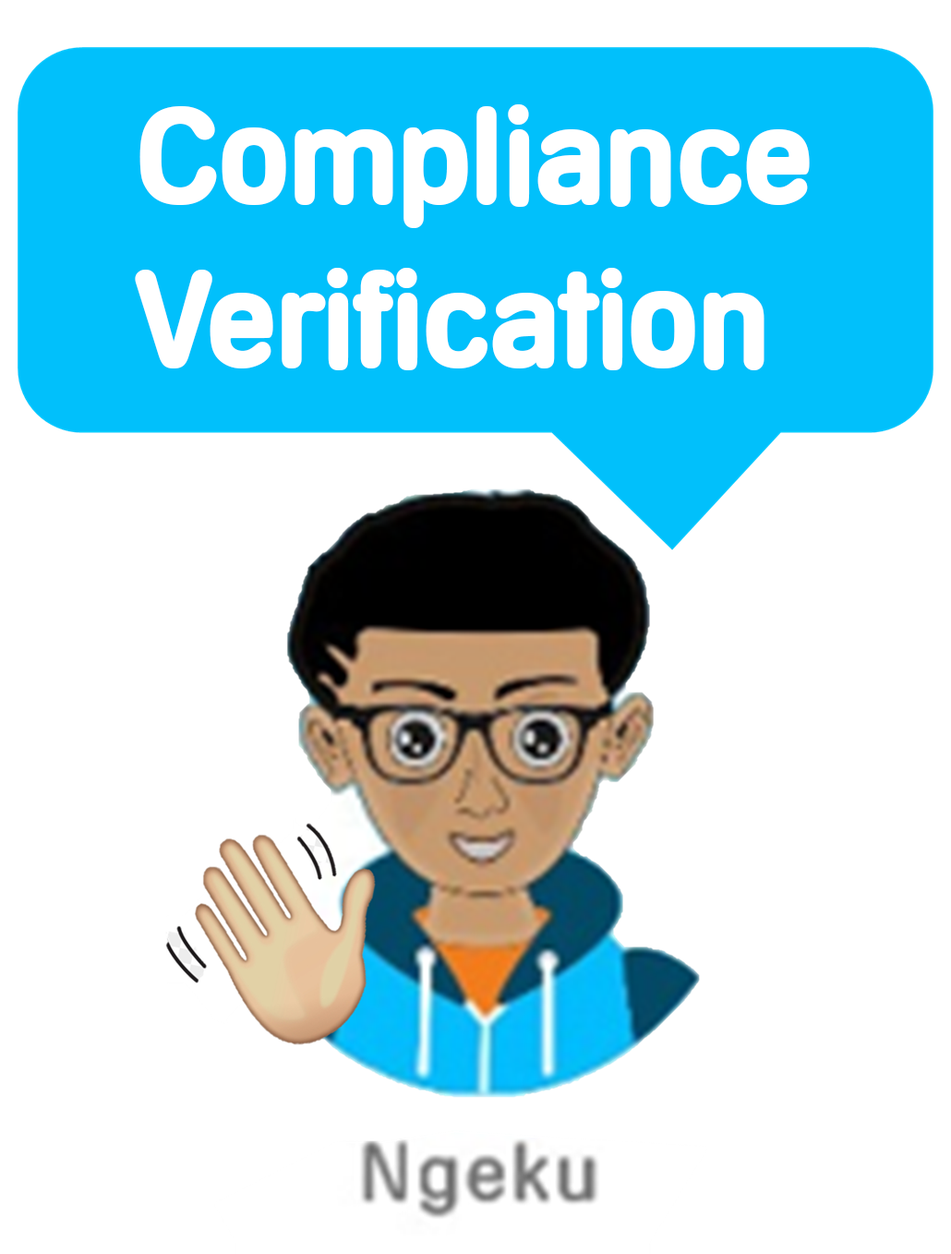
<style>
.page{position:relative;width:951px;height:1254px;background:#ffffff}
.page>*{position:absolute;margin:0}
.t1{font:136.2px "AndreasBecker-Bold";color:#ffffff}
</style>
<div class="page">
<p class="t1" style="left:135px;top:104px;width:675px;height:266px">Compliance <br>Verification</p>
</div>
